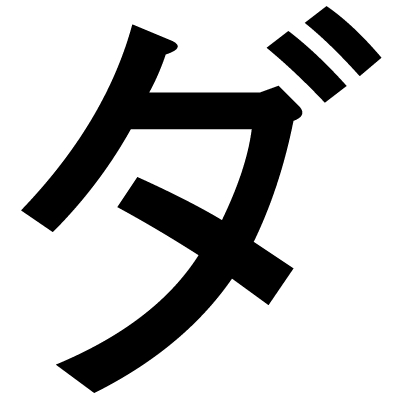
<style>
.page{position:relative;width:400px;height:400px;background:#ffffff}
.page>*{position:absolute;margin:0}
.t1{font:424.8px "MS-PGothic";color:#000000}
</style>
<div class="page">
<p class="t1" style="left:21px;top:6px;width:361px;height:387px">ダ</p>
</div>
